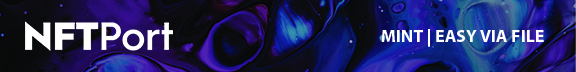
<style>
.page{position:relative;width:576px;height:72px}
.page>*{position:absolute;margin:0}
.t1{font:17.8px "MyriadPro-Bold";color:#ffffff}
</style>
<div class="page">
<p class="t1" style="left:381px;top:29px;width:163px;height:18px">MINT | EASY VIA FILE</p>
</div>
